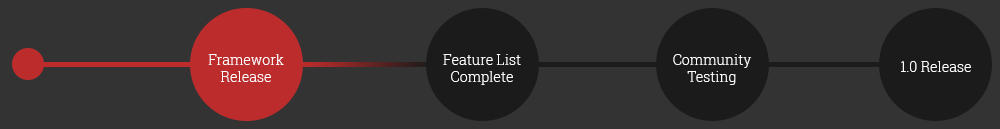
<style>
.page{position:relative;width:1000px;height:129px;background:#333333}
.page>*{position:absolute;margin:0}
.t1{font:14px "RobotoSlab-Light";color:#ffffff}
</style>
<div class="page">
<p class="t1" style="left:208px;top:54px;width:76px;height:28px;text-align:center">Framework<br>Release</p>
<p class="t1" style="left:443px;top:54px;width:78px;height:31px;text-align:center">Feature List<br>Complete</p>
<p class="t1" style="left:673px;top:54px;width:79px;height:31px;text-align:center">Community<br>Testing</p>
<p class="t1" style="left:901px;top:61px;width:70px;height:11px">1.0 Release</p>
</div>
